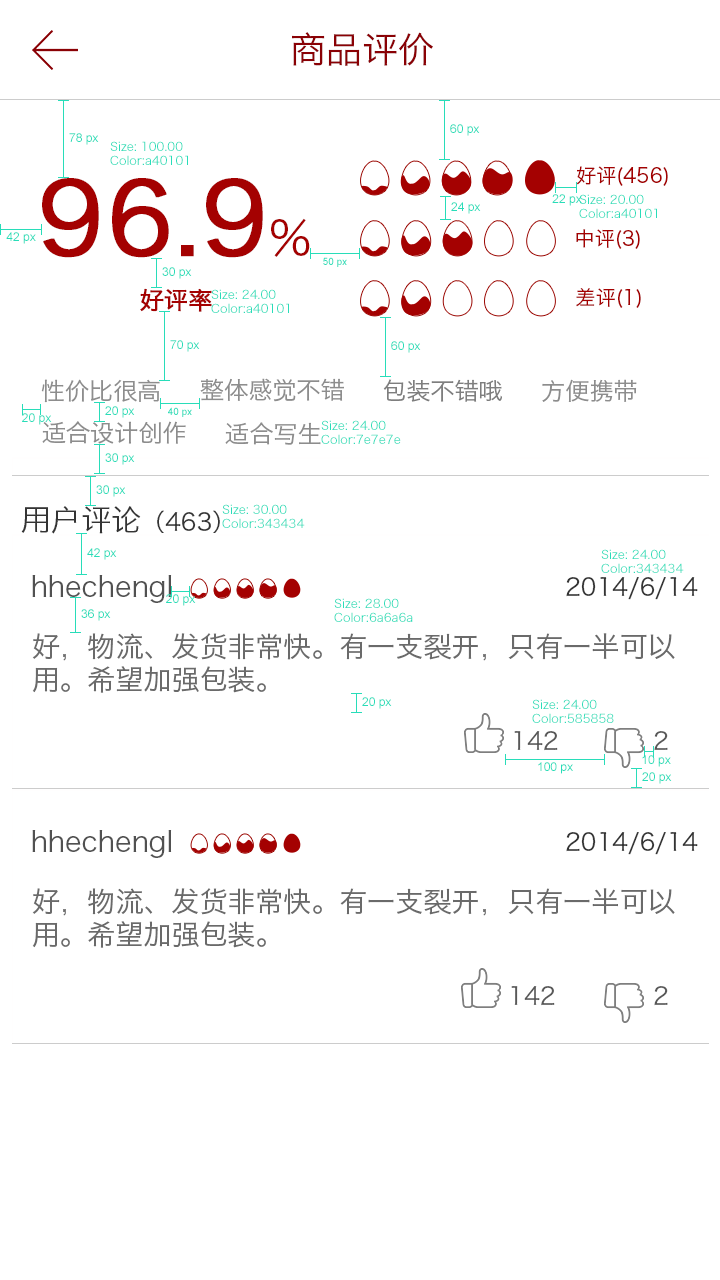
<style>
.page{position:relative;width:720px;height:1280px;background:#ffffff}
.page>*{position:absolute;margin:0}
.t1{font:36px "HiraginoSansGB-W3";color:#8a0105}
.t2{font:12px "ArialMT";color:#28ddb9}
.t3{font:12px "HiraginoSansGB-W3";color:#28ddb9}
.t4{font:20px "HiraginoSansGB-W3";color:#a40101}
.t5{font:100px "HiraginoSansGB-W3";color:#a40101;font-weight:bold}
.t6{font:48px "HiraginoSansGB-W3";color:#a40101}
.t7{font:10px "ArialMT";color:#28ddb9}
.t8{font:24px "HiraginoSansGB-W3";color:#a40101;font-weight:bold}
.t9{font:24px "HiraginoSansGB-W3";color:#8d8d8d}
.t10{font:24px "HiraginoSansGB-W3";color:#7e7e7e}
.t11{font:24px "HiraginoSansGB-W3";color:#343434}
.t12{font:30px "HiraginoSansGB-W3";color:#343434}
.t13{font:28px "HiraginoSansGB-W3";color:#515151}
.t14{font:28px "HiraginoSansGB-W3";color:#6a6a6a}
.t15{font:24px "HiraginoSansGB-W3";color:#585858}
</style>
<div class="page">
<p class="t1" style="left:292px;top:32px;width:141px;height:34px">商品评价</p>
<p class="t2" style="left:450px;top:124px;width:30px;height:12px">60 px</p>
<p class="t2" style="left:69px;top:133px;width:30px;height:12px">78 px</p>
<p class="t3" style="left:110px;top:141px;width:78px;height:24px">Size: 100.00<br>Color:a40101</p>
<p class="t4" style="left:576px;top:166px;width:92px;height:20px">好评(456)</p>
<p class="t5" style="left:42px;top:178px;width:268px;height:80px">96.9<span class="t6">%</span></p>
<p class="t2" style="left:552px;top:194px;width:30px;height:12px">22 px</p>
<p class="t3" style="left:579px;top:194px;width:78px;height:24px">Size: 20.00<br>Color:a40101</p>
<p class="t2" style="left:451px;top:202px;width:30px;height:12px">24 px</p>
<p class="t2" style="left:6px;top:232px;width:30px;height:12px">42 px</p>
<p class="t4" style="left:576px;top:229px;width:64px;height:20px">中评(3)</p>
<p class="t7" style="left:323px;top:257px;width:24px;height:10px">50 px</p>
<p class="t2" style="left:162px;top:267px;width:30px;height:12px">30 px</p>
<p class="t8" style="left:140px;top:288px;width:72px;height:24px">好评率</p>
<p class="t3" style="left:211px;top:289px;width:78px;height:24px">Size: 24.00<br>Color:a40101</p>
<p class="t4" style="left:576px;top:288px;width:65px;height:20px">差评(1)</p>
<p class="t2" style="left:170px;top:340px;width:30px;height:12px">70 px</p>
<p class="t2" style="left:391px;top:341px;width:30px;height:12px">60 px</p>
<p class="t9" style="left:41px;top:379px;width:119px;height:24px">性价比很高</p>
<p class="t9" style="left:200px;top:378px;width:144px;height:24px">整体感觉不错</p>
<p class="t10" style="left:383px;top:379px;width:119px;height:23px">包装不错哦</p>
<p class="t9" style="left:542px;top:379px;width:95px;height:23px">方便携带</p>
<p class="t2" style="left:22px;top:413px;width:30px;height:12px">20 px</p>
<p class="t2" style="left:105px;top:406px;width:30px;height:12px">20 px</p>
<p class="t7" style="left:168px;top:407px;width:24px;height:10px">40 px</p>
<p class="t9" style="left:42px;top:421px;width:144px;height:23px">适合设计创作</p>
<p class="t9" style="left:225px;top:422px;width:96px;height:23px">适合写生</p>
<p class="t3" style="left:321px;top:420px;width:80px;height:24px">Size: 24.00<br>Color:7e7e7e</p>
<p class="t2" style="left:105px;top:453px;width:30px;height:12px">30 px</p>
<p class="t2" style="left:96px;top:485px;width:30px;height:12px">30 px</p>
<p class="t11" style="left:21px;top:506px;width:199px;height:28px"><span class="t12">用户评论</span>（463）</p>
<p class="t3" style="left:222px;top:504px;width:83px;height:24px">Size: 30.00<br>Color:343434</p>
<p class="t2" style="left:87px;top:548px;width:30px;height:12px">42 px</p>
<p class="t3" style="left:601px;top:549px;width:83px;height:24px">Size: 24.00<br>Color:343434</p>
<p class="t13" style="left:32px;top:575px;width:140px;height:28px">hhechengl</p>
<p class="t11" style="left:566px;top:577px;width:132px;height:23px">2014/6/14</p>
<p class="t2" style="left:166px;top:594px;width:30px;height:12px">20 px</p>
<p class="t3" style="left:334px;top:598px;width:79px;height:24px">Size: 28.00<br>Color:6a6a6a</p>
<p class="t2" style="left:81px;top:609px;width:30px;height:12px">36 px</p>
<p class="t14" style="left:32px;top:633px;width:643px;height:60px">好，物流、发货非常快。有一支裂开，只有一半可以<br>用。希望加强包装。</p>
<p class="t2" style="left:362px;top:697px;width:30px;height:12px">20 px</p>
<p class="t3" style="left:532px;top:699px;width:82px;height:24px">Size: 24.00<br>Color:585858</p>
<p class="t15" style="left:514px;top:731px;width:44px;height:20px">142</p>
<p class="t15" style="left:654px;top:731px;width:14px;height:20px">2</p>
<p class="t2" style="left:642px;top:755px;width:29px;height:12px">10 px</p>
<p class="t2" style="left:538px;top:762px;width:35px;height:12px">100 px</p>
<p class="t2" style="left:642px;top:772px;width:30px;height:12px">20 px</p>
<p class="t13" style="left:32px;top:830px;width:140px;height:28px">hhechengl</p>
<p class="t11" style="left:566px;top:832px;width:132px;height:23px">2014/6/14</p>
<p class="t14" style="left:32px;top:888px;width:643px;height:60px">好，物流、发货非常快。有一支裂开，只有一半可以<br>用。希望加强包装。</p>
<p class="t15" style="left:511px;top:986px;width:44px;height:20px">142</p>
<p class="t15" style="left:654px;top:986px;width:14px;height:20px">2</p>
</div>
